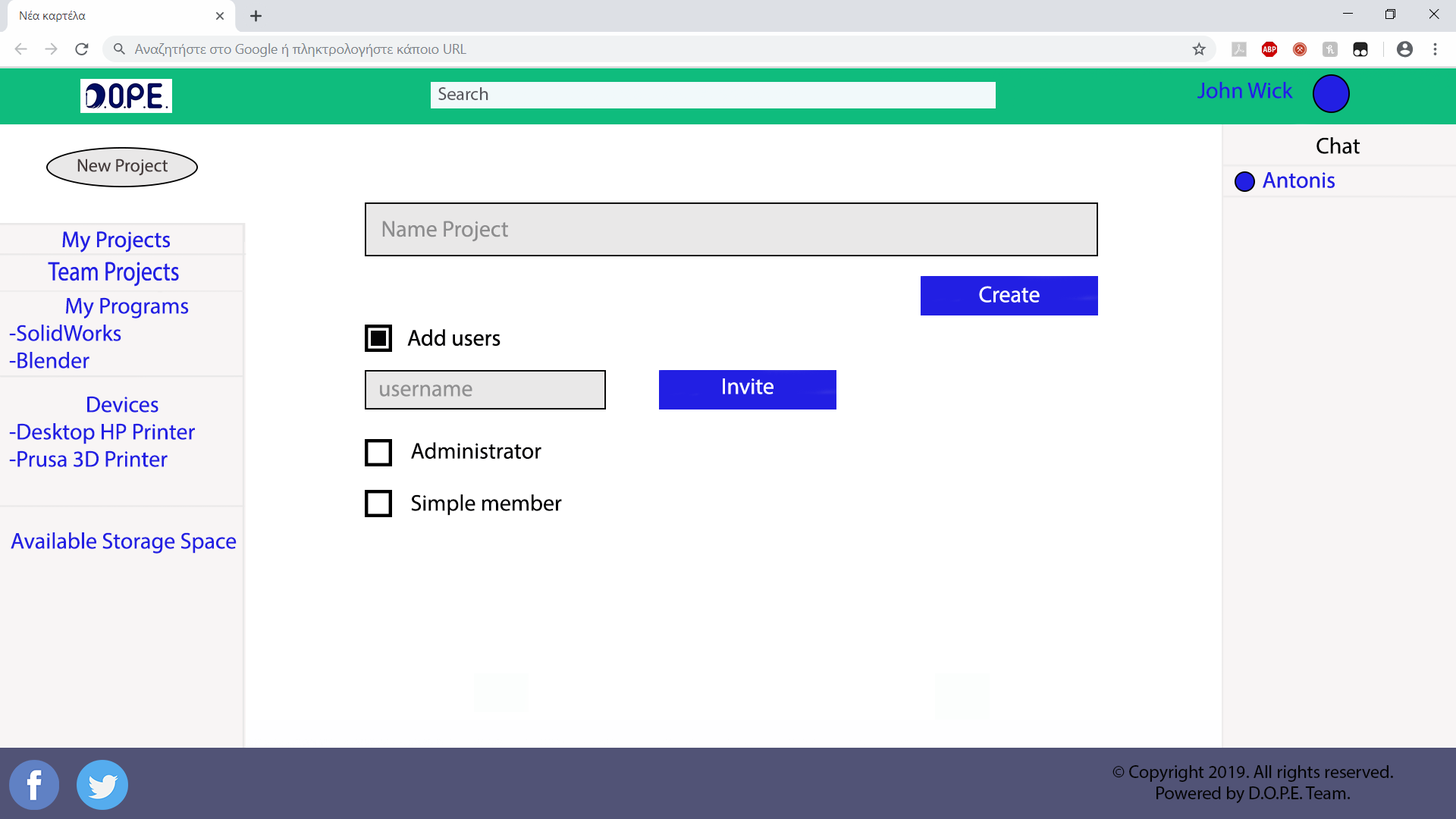
<style>
.page{position:relative;width:1456px;height:819px;background:#ffffff}
.page>*{position:absolute;margin:0}
.t1{font:18.2px "MyriadPro-Regular";color:#57575d}
.t2{font:22.7px "MyriadPro-Regular";color:#221fe3}
.t3{font:22.7px "MyriadPro-Regular";color:#000201}
.t4{font:18.2px "MyriadPro-Regular";color:#463d3d}
.t5{font:22.7px "MyriadPro-Regular";color:#8d8d8e}
.t6{font:22.7px "MyriadPro-Regular";color:#fefeff}
.t7{font:22.7px "MyriadPro-Regular";color:#909091}
.t8{font:22.7px "MyriadPro-Regular";color:#000002}
.t9{font:18.2px "MyriadPro-Regular";color:#050505}
</style>
<div class="page">
<p class="t1" style="left:438px;top:87px;width:50px;height:13px">Search</p>
<p class="t2" style="left:1197px;top:82px;width:96px;height:17px">John Wick</p>
<p class="t3" style="left:1316px;top:137px;width:44px;height:17px">Chat</p>
<p class="t4" style="left:77px;top:158px;width:91px;height:18px">New Project</p>
<p class="t5" style="left:382px;top:221px;width:126px;height:21px">Name Project</p>
<p class="t6" style="left:979px;top:286px;width:61px;height:17px">Create</p>
<p class="t2" style="left:9px;top:297px;width:180px;height:72px;text-align:center">My Programs<br>-SolidWorks<br>-Blender</p>
<p class="t7" style="left:380px;top:384px;width:92px;height:13px">username</p>
<p class="t6" style="left:723px;top:378px;width:50px;height:16px">Invite</p>
<p class="t2" style="left:87px;top:396px;width:71px;height:17px">Devices</p>
<p class="t2" style="left:9px;top:423px;width:186px;height:44px">-Desktop HP Printer<br>-Prusa 3D Printer</p>
<p class="t8" style="left:411px;top:442px;width:130px;height:17px">Administrator</p>
<p class="t8" style="left:411px;top:494px;width:151px;height:22px">Simple member</p>
<p class="t2" style="left:11px;top:532px;width:226px;height:22px">Available Storage Space</p>
<p class="t9" style="left:1112px;top:765px;width:281px;height:38px;text-align:center">© Copyright 2019. All rights reserved. Powered by D.O.P.E. Team.</p>
</div>
